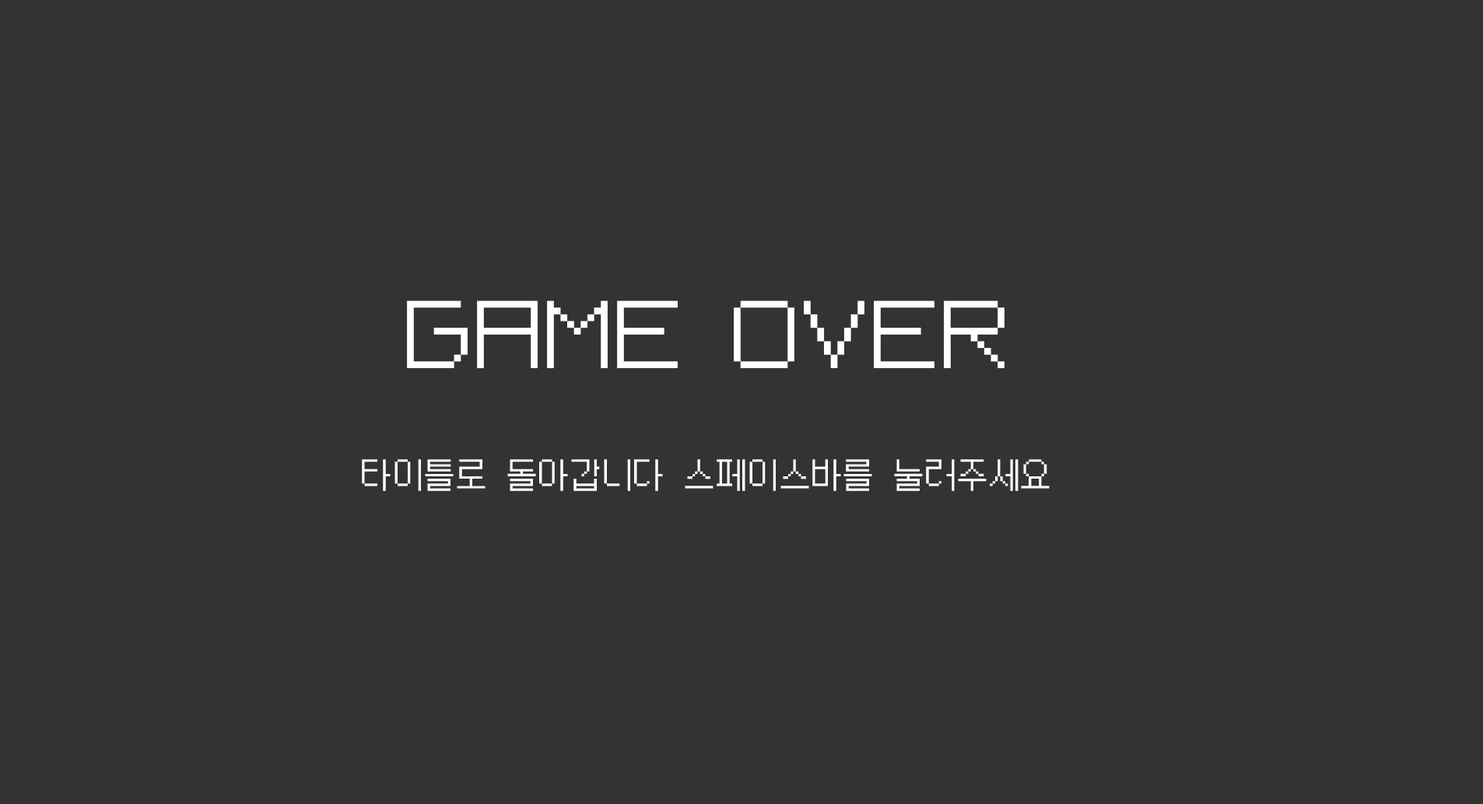
<style>
.page{position:relative;width:1483px;height:804px;background:#333333}
.page>*{position:absolute;margin:0}
.t1{font:37.4px "PFStardust";color:#ffffff}
.t2{font:46.7px "PFStardust";color:#ffffff}
.t3{font:93.4px "PFStardust";color:#ffffff}
</style>
<div class="page">
<p class="t1" style="left:362px;top:300px;width:688px;height:191px;text-align:center"><span class="t2"><br><br><br></span><span class="t3">GAME OVER <br></span>타이틀로 돌아갑니다 스페이스바를 눌러주세요</p>
</div>
